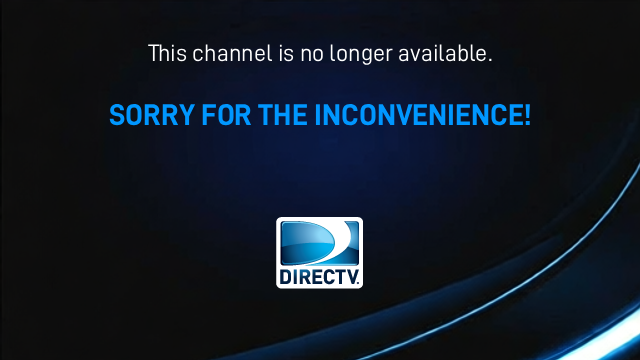
<style>
.page{position:relative;width:640px;height:360px}
.page>*{position:absolute;margin:0}
.t1{font:24px "D-DIN";color:#ffffff}
.t2{font:30px "D-DIN-Bold";color:#0097ff}
</style>
<div class="page">
<p class="t1" style="left:109px;top:44px;width:421px;height:82px;text-align:center">This channel is no longer available.<br><br><span class="t2">SORRY FOR THE INCONVENIENCE!</span></p>
</div>
